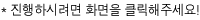
<style>
.page{position:relative;width:200px;height:20px;background:#ffffff}
.page>*{position:absolute;margin:0}
.t1{font:14px "Dotum";letter-spacing:-0.05em;color:#000000;scale:0.9 1}
</style>
<div class="page">
<p class="t1" style="left:1px;top:3px;width:198px;height:13px">* 진행하시려면 화면을 클릭해주세요!</p>
</div>
